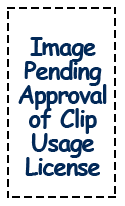
<style>
.page{position:relative;width:125px;height:206px;background:#ffffff}
.page>*{position:absolute;margin:0}
.t1{font:24px/24px "ComicSansMS-Bold";letter-spacing:-0.05em;color:#022958}
</style>
<div class="page">
<p class="t1" style="left:18px;top:37px;width:89px;height:139px;text-align:center">Image<br>Pending<br>Approval<br>of Clip<br>Usage<br>License</p>
</div>
